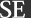
<style>
.page{position:relative;width:31px;height:18px;background:#333333}
.page>*{position:absolute;margin:0}
.t1{font:24px "HeiseiMinStd-W7";color:#ffffff}
</style>
<div class="page">
<p class="t1" style="left:0px;top:0px;width:25px;height:18px">SE</p>
</div>
